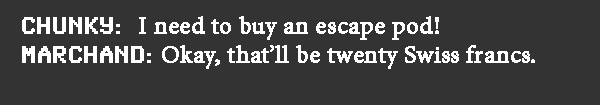
<style>
.page{position:relative;width:600px;height:105px;background:#333333}
.page>*{position:absolute;margin:0}
.t1{font:24px "MinionPro-Regular";color:#ffffff;font-weight:bold}
.t2{font:24px "SynchroLET";color:#ffffff;font-weight:bold}
</style>
<div class="page">
<p class="t1" style="left:22px;top:16px;width:513px;height:53px"><span class="t2">CHUNKY:  </span>I need to buy an escape pod!<br><span class="t2">MARCHAND: </span>Okay, that’ll be twenty Swiss francs.</p>
</div>
